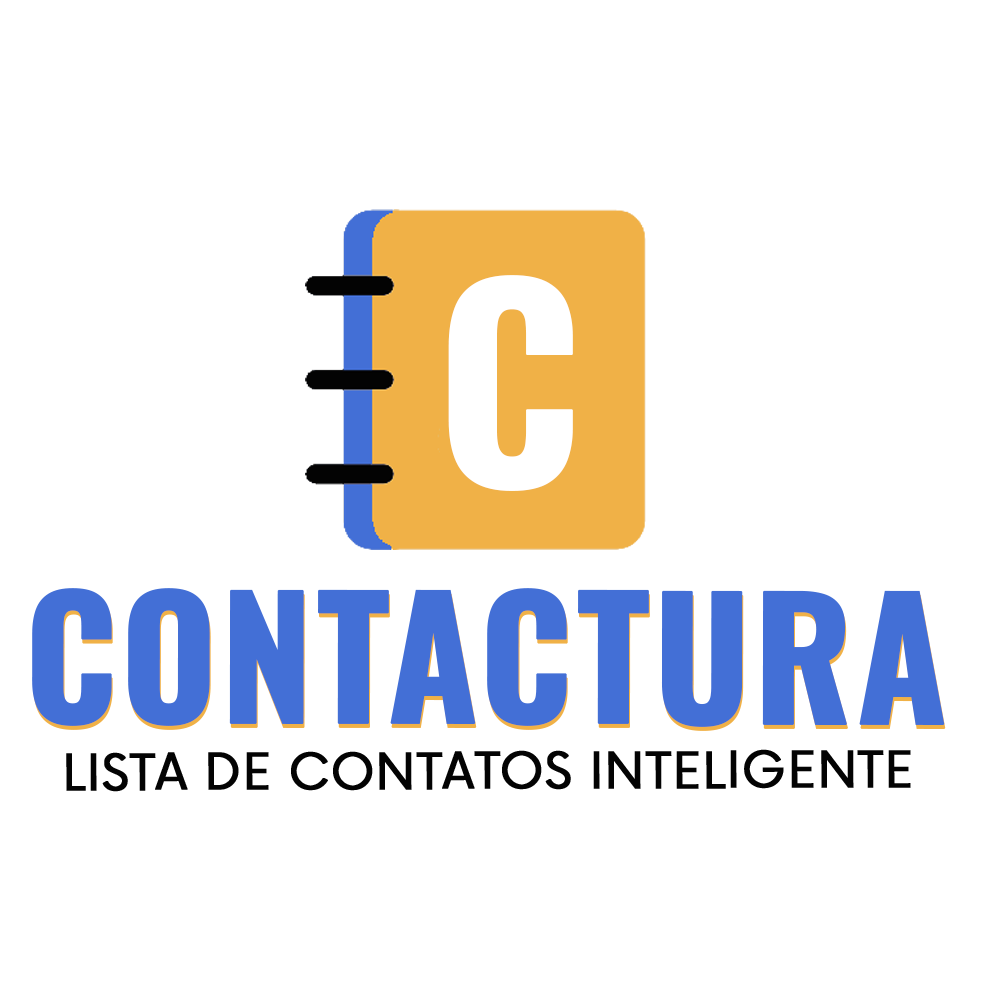
<style>
.page{position:relative;width:1000px;height:1000px;background:#ffffff}
.page>*{position:absolute;margin:0}
.t1{font:257.2px "Oswald-Bold";color:#ffffff;text-transform:uppercase;font-weight:bold}
.t2{font:163.3px "Oswald-Bold";color:#436fd6;text-transform:uppercase;font-weight:bold}
.t3{font:48.9px "Now-Regular";color:#030303;text-transform:uppercase;font-weight:bold}
</style>
<div class="page">
<p class="t1" style="left:448px;top:275px;width:125px;height:216px">c</p>
<p class="t2" style="left:32px;top:588px;width:913px;height:139px">contactura</p>
<p class="t2" style="left:33px;top:592px;width:913px;height:139px">contactura</p>
<p class="t3" style="left:66px;top:749px;width:845px;height:43px">lista de contatos inteligente</p>
</div>
